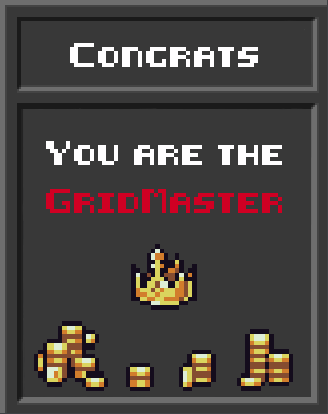
<style>
.page{position:relative;width:328px;height:414px;background:#383838}
.page>*{position:absolute;margin:0}
.t1{font:20px "8-bit-HUD";color:#fffeff}
.t2{font:20px/48px "8-bit-HUD";color:#fffeff}
.t3{font:20px/48px "8-bit-HUD";color:#d00023}
</style>
<div class="page">
<p class="t1" style="left:70px;top:43px;width:188px;height:24px">Congrats</p>
<p class="t2" style="left:46px;top:141px;width:236px;height:72px;text-align:center">You are the<br><span class="t3">GridMaster</span></p>
</div>
